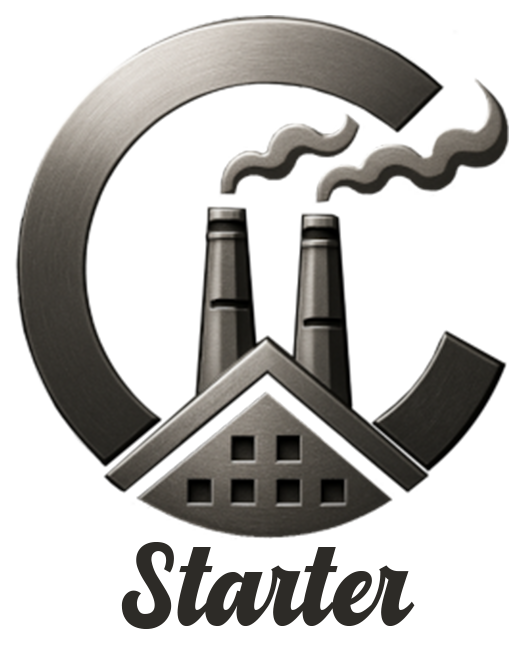
<style>
.page{position:relative;width:520px;height:668px;background:#ffffff}
.page>*{position:absolute;margin:0}
.t1{font:121px "Blanderman";color:#2d2b27}
</style>
<div class="page">
<p class="t1" style="left:121px;top:542px;width:294px;height:87px">Starter</p>
</div>
